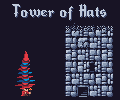
<style>
.page{position:relative;width:120px;height:100px;background:#181425}
.page>*{position:absolute;margin:0}
.t1{font:16px "Royalati";color:#c0cbdc}
</style>
<div class="page">
<p class="t1" style="left:12px;top:4px;width:94px;height:16px">Tower of Hats</p>
</div>
